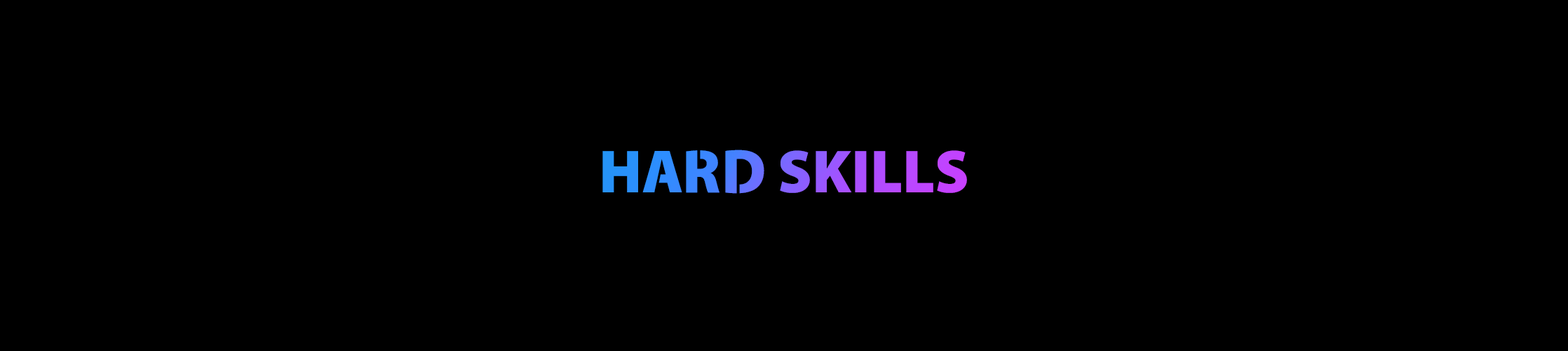
<style>
.page{position:relative;width:1568px;height:351px;background:#000000}
.page>*{position:absolute;margin:0}
.t1{font:61px "Cleanvertising-Black"}
</style>
<div class="page">
<p class="t1" style="left:602px;top:149px;width:365px;height:45px">HARD SKILLS</p>
</div>
